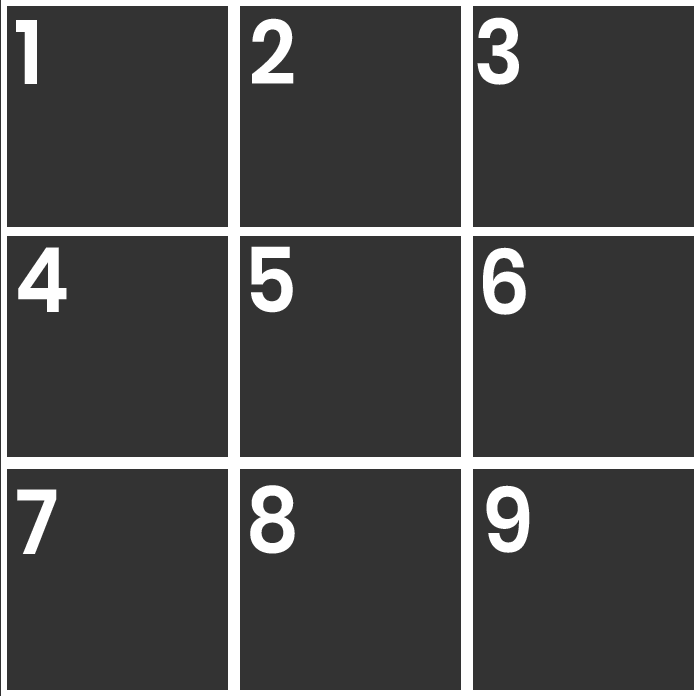
<style>
.page{position:relative;width:700px;height:696px;background:#333333}
.page>*{position:absolute;margin:0}
.t1{font:90.5px "Poppins-SemiBold";color:#ffffff;scale:0.92 1}
</style>
<div class="page">
<p class="t1" style="left:477px;top:17px;width:42px;height:68px">3</p>
<p class="t1" style="left:16px;top:20px;width:21px;height:64px">1</p>
<p class="t1" style="left:252px;top:18px;width:42px;height:66px">2</p>
<p class="t1" style="left:251px;top:246px;width:42px;height:67px">5</p>
<p class="t1" style="left:18px;top:247px;width:49px;height:65px">4</p>
<p class="t1" style="left:483px;top:247px;width:43px;height:68px">6</p>
<p class="t1" style="left:250px;top:485px;width:45px;height:69px">8</p>
<p class="t1" style="left:486px;top:485px;width:44px;height:68px">9</p>
<p class="t1" style="left:17px;top:489px;width:40px;height:65px">7</p>
</div>
